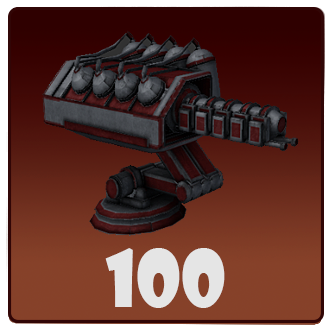
<style>
.page{position:relative;width:330px;height:330px}
.page>*{position:absolute;margin:0}
.t1{font:76.4px "ShowcardGothic-Reg";color:#e5e5e5}
</style>
<div class="page">
<p class="t1" style="left:105px;top:248px;width:120px;height:60px">100</p>
</div>
